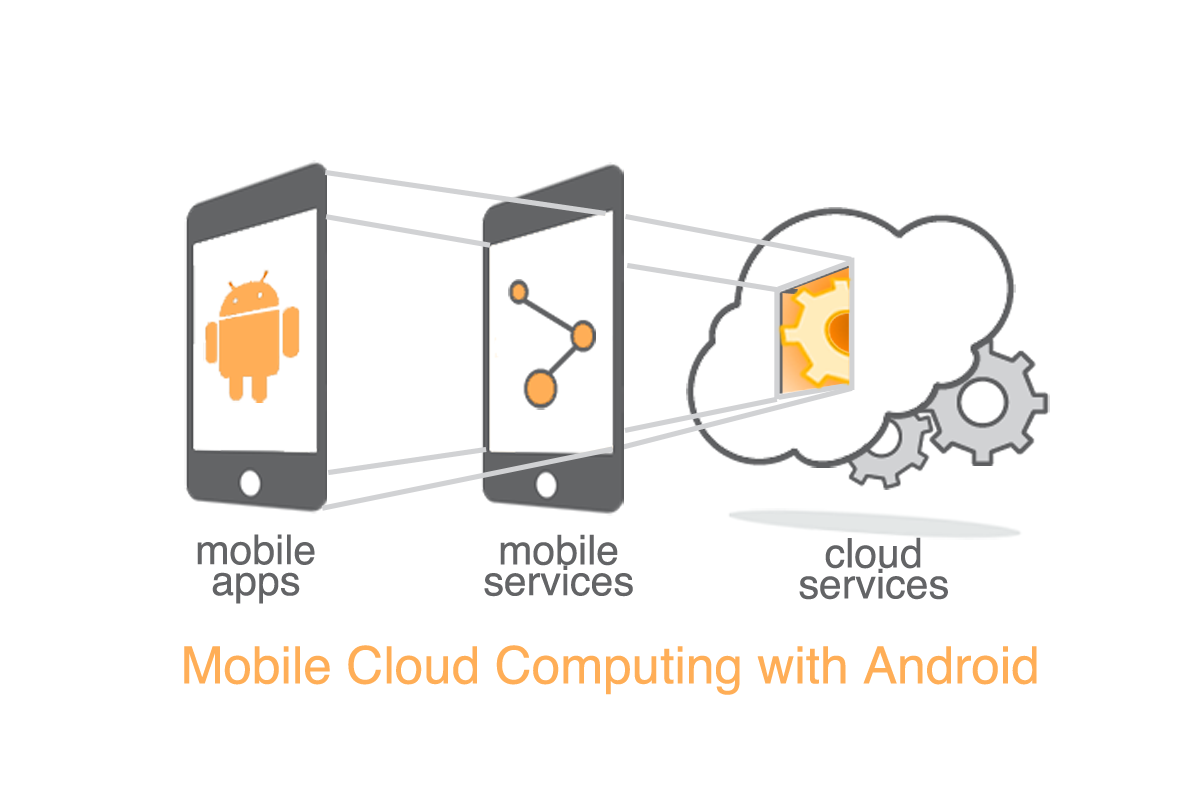
<style>
.page{position:relative;width:1200px;height:803px;background:#ffffff}
.page>*{position:absolute;margin:0}
.t1{font:41.1px/30.8px "Helvetica";color:#636466}
.t2{font:51.4px "Helvetica";color:#ffae57}
</style>
<div class="page">
<p class="t1" style="left:197px;top:534px;width:118px;height:70px;text-align:center">mobile<br>apps</p>
<p class="t1" style="left:484px;top:534px;width:149px;height:63px;text-align:center">mobile<br>services</p>
<p class="t1" style="left:799px;top:537px;width:149px;height:63px;text-align:center">cloud<br>services</p>
<p class="t2" style="left:184px;top:645px;width:853px;height:50px">Mobile Cloud Computing with Android</p>
</div>
